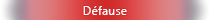
<style>
.page{position:relative;width:209px;height:20px}
.page>*{position:absolute;margin:0}
.t1{font:12.5px "LaoUI";color:#fefefe}
</style>
<div class="page">
<p class="t1" style="left:83px;top:6px;width:44px;height:9px">Défause</p>
</div>
